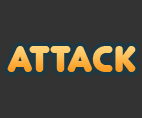
<style>
.page{position:relative;width:142px;height:118px;background:#333333}
.page>*{position:absolute;margin:0}
.t1{font:44px "Junegull"}
</style>
<div class="page">
<p class="t1" style="left:7px;top:46px;width:129px;height:26px">ATTACK</p>
</div>
